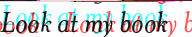
<style>
.page{position:relative;width:192px;height:37px;background:#ffffff}
.page>*{position:absolute;margin:0}
.t1{font:33.3px "MrsEavesItalic"}
</style>
<div class="page">
<p class="t1" style="left:0px;top:4px;width:168px;height:30px">Look at my book</p>
</div>
